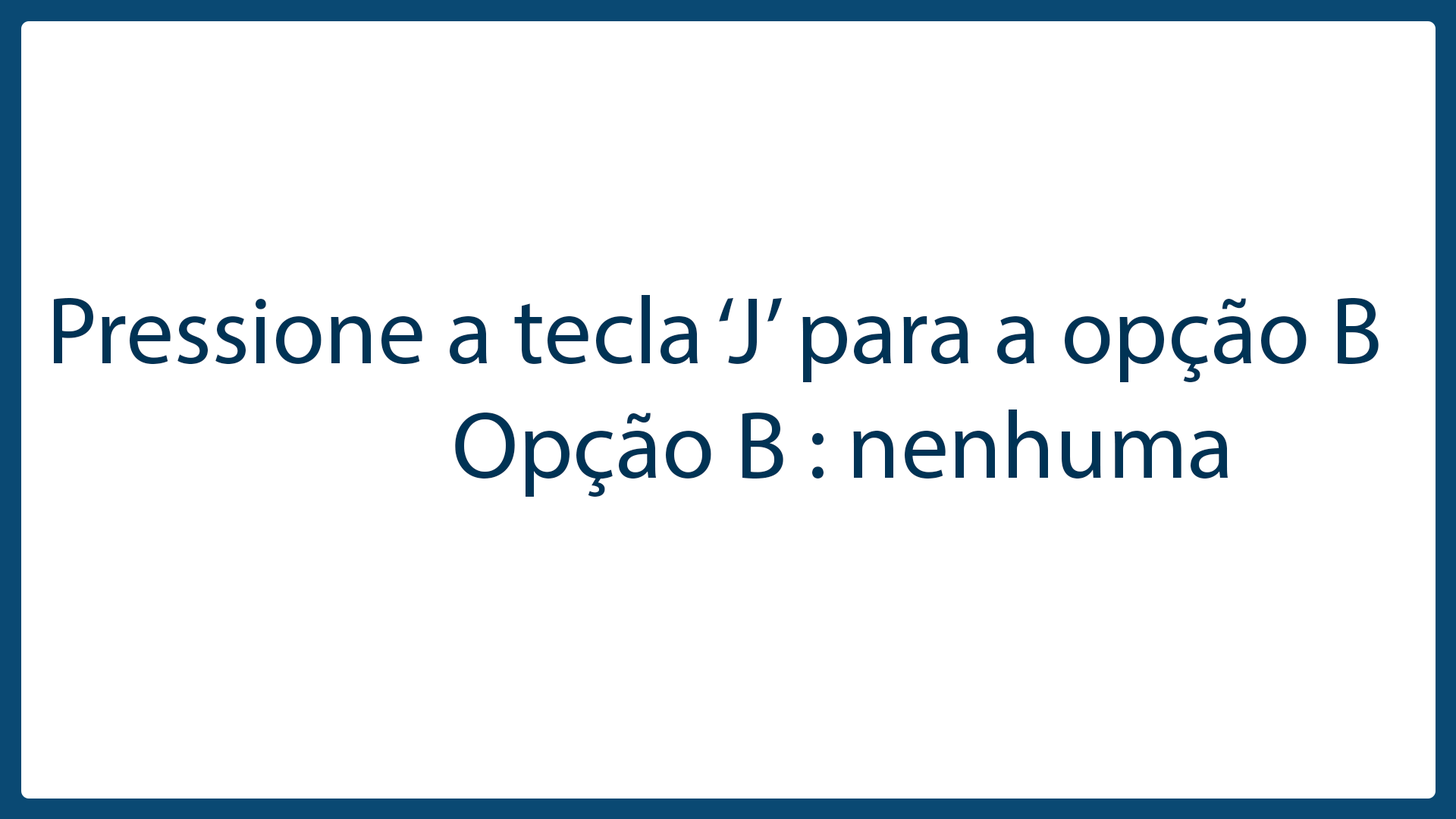
<style>
.page{position:relative;width:1456px;height:819px;background:#ffffff}
.page>*{position:absolute;margin:0}
.t1{font:95.9px "MyriadPro-Regular";color:#003355}
</style>
<div class="page">
<p class="t1" style="left:54px;top:295px;width:1325px;height:202px">Pressione a tecla ‘J’ para a opção B<br>                    Opção B : nenhuma</p>
</div>
